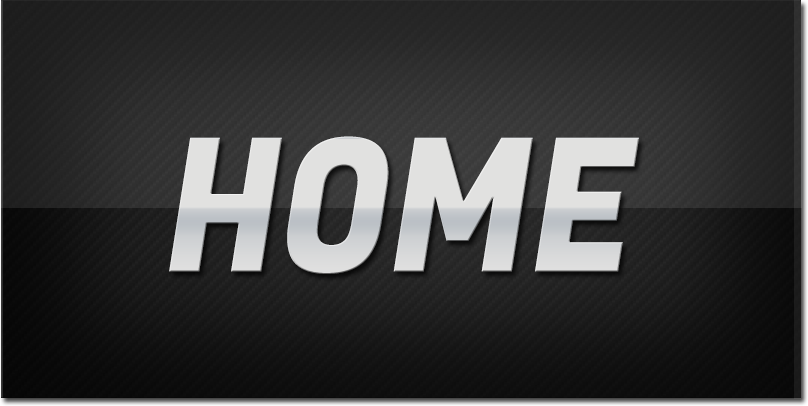
<style>
.page{position:relative;width:808px;height:406px}
.page>*{position:absolute;margin:0}
.t1{font:185.2px "FugazOne-Regular";color:#dfdfdf;scale:0.89 1}
</style>
<div class="page">
<p class="t1" style="left:169px;top:136px;width:470px;height:138px">HOME</p>
</div>
